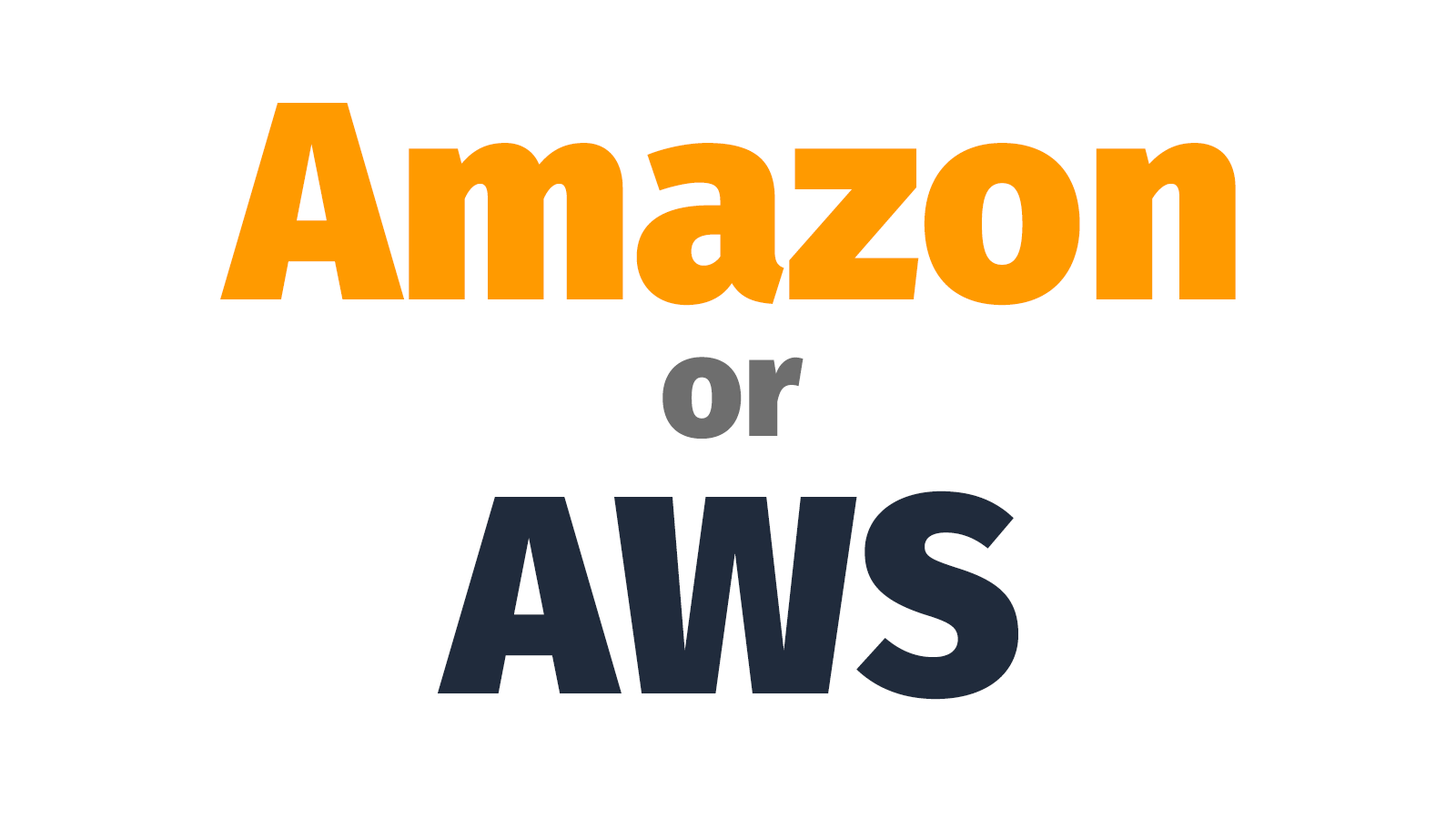
<style>
.page{position:relative;width:1456px;height:819px;background:#ffffff}
.page>*{position:absolute;margin:0}
.t1{font:282.1px "FiraSans-Heavy";color:#ff9a00}
.t2{font:142px "FiraSans-Heavy";color:#6e6e6e}
.t3{font:282.1px "FiraSans-Heavy";color:#202b3c}
</style>
<div class="page">
<p class="t1" style="left:220px;top:103px;width:1016px;height:203px">Amazon</p>
<p class="t2" style="left:662px;top:357px;width:142px;height:82px">or</p>
<p class="t3" style="left:438px;top:490px;width:580px;height:210px">AWS</p>
</div>
